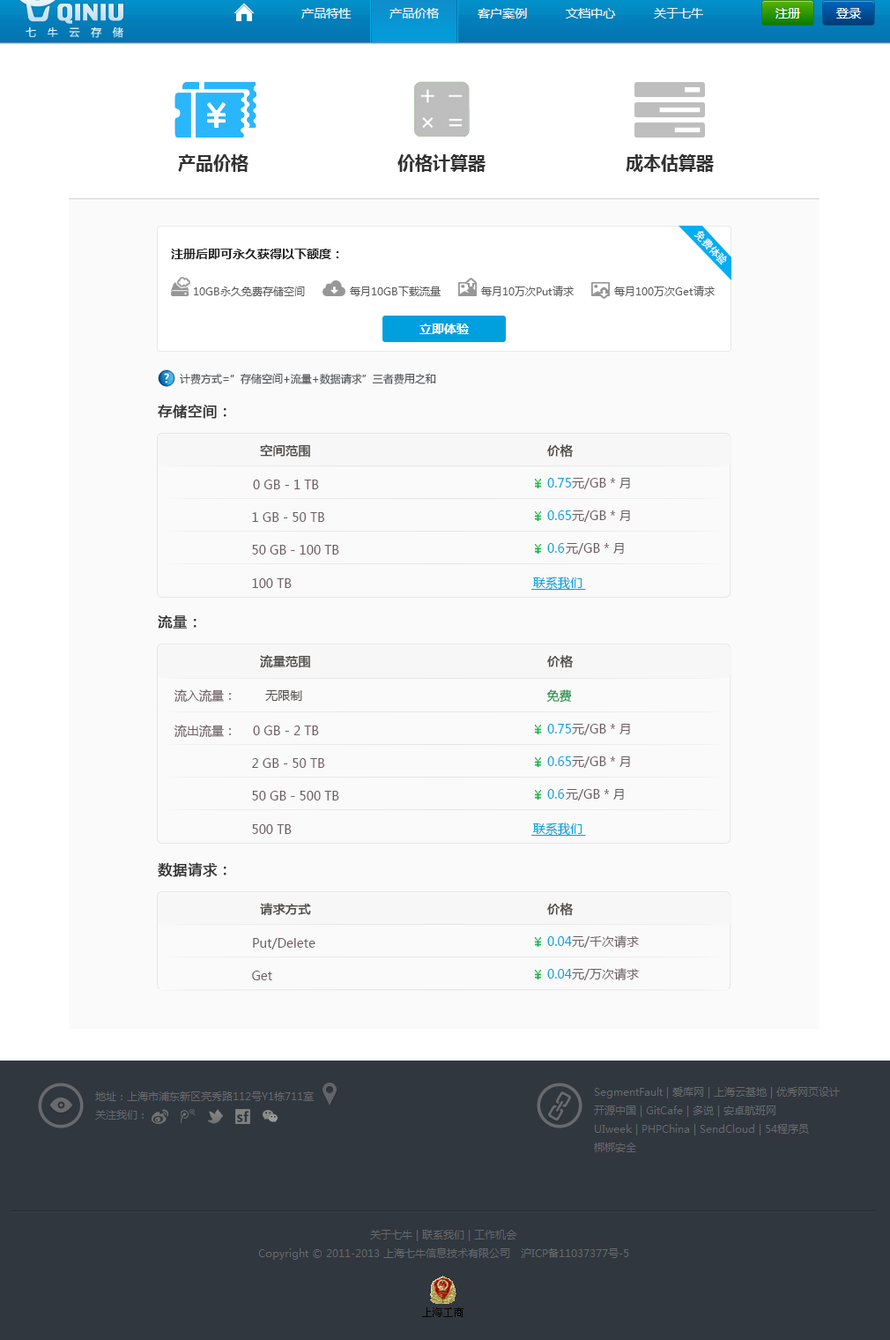
<style>
.page{position:relative;width:890px;height:1340px;background:#fafafa}
.page>*{position:absolute;margin:0}
.t1{font:17.6px "MicrosoftYaHei-Bold";color:#323232}
.t2{font:12.3px "MicrosoftYaHei-Bold";color:#262626}
.t3{font:10.6px "MicrosoftYaHei";color:#585858}
.t4{font:12.3px "MicrosoftYaHei-Bold";color:#ffffff}
.t5{font:10.6px "MicrosoftYaHei";color:#4f5155}
.t6{font:14.1px "MicrosoftYaHei";color:#323232;font-weight:bold}
.t7{font:12.3px "MicrosoftYaHei";color:#4d4a47;font-weight:bold}
.t8{font:12.3px "MicrosoftYaHei";color:#6d5d63}
.t9{font:12.3px "MicrosoftYaHei";color:#00a0de}
.t10{font:12.3px "MicrosoftYaHei";color:#4d4a47}
.t11{font:12.3px "MicrosoftYaHei";color:#118c3e}
</style>
<div class="page">
<p class="t1" style="left:178px;top:154px;width:71px;height:18px">产品价格</p>
<p class="t1" style="left:397px;top:154px;width:89px;height:18px">价格计算器</p>
<p class="t1" style="left:626px;top:154px;width:88px;height:18px">成本估算器</p>
<p class="t2" style="left:171px;top:249px;width:168px;height:10px">注册后即可永久获得以下额度：</p>
<p class="t3" style="left:194px;top:286px;width:111px;height:10px">10GB永久免费存储空间</p>
<p class="t3" style="left:350px;top:286px;width:91px;height:10px">每月10GB下载流量</p>
<p class="t3" style="left:481px;top:286px;width:93px;height:10px">每月10万次Put请求</p>
<p class="t3" style="left:614px;top:286px;width:101px;height:10px">每月100万次Get请求</p>
<p class="t4" style="left:420px;top:323px;width:49px;height:11px">立即体验</p>
<p class="t5" style="left:180px;top:373px;width:256px;height:11px">计费方式=”存储空间+流量+数据请求”三者费用之和</p>
<p class="t6" style="left:158px;top:404px;width:68px;height:15px">存储空间：</p>
<p class="t7" style="left:260px;top:444px;width:50px;height:13px">空间范围</p>
<p class="t7" style="left:547px;top:444px;width:26px;height:13px">价格</p>
<p class="t8" style="left:253px;top:479px;width:66px;height:10px">0 GB - 1 TB</p>
<p class="t9" style="left:547px;top:478px;width:24px;height:9px">0.75</p>
<p class="t8" style="left:572px;top:478px;width:58px;height:11px">元/GB * 月</p>
<p class="t8" style="left:252px;top:512px;width:72px;height:10px">1 GB - 50 TB</p>
<p class="t9" style="left:547px;top:510px;width:24px;height:10px">0.65</p>
<p class="t8" style="left:572px;top:510px;width:58px;height:12px">元/GB * 月</p>
<p class="t8" style="left:252px;top:545px;width:87px;height:9px">50 GB - 100 TB</p>
<p class="t9" style="left:547px;top:543px;width:18px;height:10px">0.6</p>
<p class="t8" style="left:566px;top:543px;width:58px;height:11px">元/GB * 月</p>
<p class="t8" style="left:252px;top:578px;width:40px;height:10px">100 TB</p>
<p class="t9" style="left:533px;top:576px;width:50px;height:14px">联系我们</p>
<p class="t6" style="left:158px;top:615px;width:39px;height:13px">流量：</p>
<p class="t7" style="left:260px;top:655px;width:50px;height:13px">流量范围</p>
<p class="t7" style="left:547px;top:655px;width:26px;height:13px">价格</p>
<p class="t8" style="left:175px;top:689px;width:397px;height:13px">流入流量：<span class="t10">        无限制                                                                   </span><span class="t11">免费</span></p>
<p class="t8" style="left:175px;top:724px;width:56px;height:14px">流出流量：</p>
<p class="t8" style="left:253px;top:725px;width:66px;height:10px">0 GB - 2 TB</p>
<p class="t9" style="left:547px;top:724px;width:24px;height:9px">0.75</p>
<p class="t8" style="left:572px;top:724px;width:58px;height:11px">元/GB * 月</p>
<p class="t8" style="left:252px;top:758px;width:72px;height:10px">2 GB - 50 TB</p>
<p class="t9" style="left:547px;top:756px;width:24px;height:10px">0.65</p>
<p class="t8" style="left:572px;top:756px;width:58px;height:12px">元/GB * 月</p>
<p class="t8" style="left:252px;top:791px;width:87px;height:9px">50 GB - 500 TB</p>
<p class="t9" style="left:547px;top:789px;width:18px;height:9px">0.6</p>
<p class="t8" style="left:566px;top:789px;width:58px;height:11px">元/GB * 月</p>
<p class="t8" style="left:252px;top:824px;width:40px;height:10px">500 TB</p>
<p class="t9" style="left:533px;top:822px;width:50px;height:13px">联系我们</p>
<p class="t6" style="left:158px;top:862px;width:68px;height:15px">数据请求：</p>
<p class="t7" style="left:260px;top:902px;width:51px;height:14px">请求方式</p>
<p class="t7" style="left:547px;top:902px;width:26px;height:14px">价格</p>
<p class="t8" style="left:253px;top:938px;width:63px;height:11px">Put/Delete</p>
<p class="t9" style="left:547px;top:936px;width:25px;height:10px">0.04</p>
<p class="t8" style="left:572px;top:935px;width:67px;height:12px">元/千次请求</p>
<p class="t8" style="left:252px;top:970px;width:20px;height:10px">Get</p>
<p class="t9" style="left:547px;top:969px;width:25px;height:9px">0.04</p>
<p class="t8" style="left:572px;top:968px;width:67px;height:12px">元/万次请求</p>
</div>
